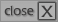
<style>
.page{position:relative;width:58px;height:22px}
.page>*{position:absolute;margin:0}
.t1{font:13px "LaudatioC";color:#3c3b3b}
.t2{font:15.5px "LaudatioC";color:#3c3b3b;scale:1.16 1}
</style>
<div class="page">
<p class="t1" style="left:4px;top:5px;width:30px;height:11px">close</p>
<p class="t2" style="left:41px;top:5px;width:12px;height:12px">X</p>
</div>
